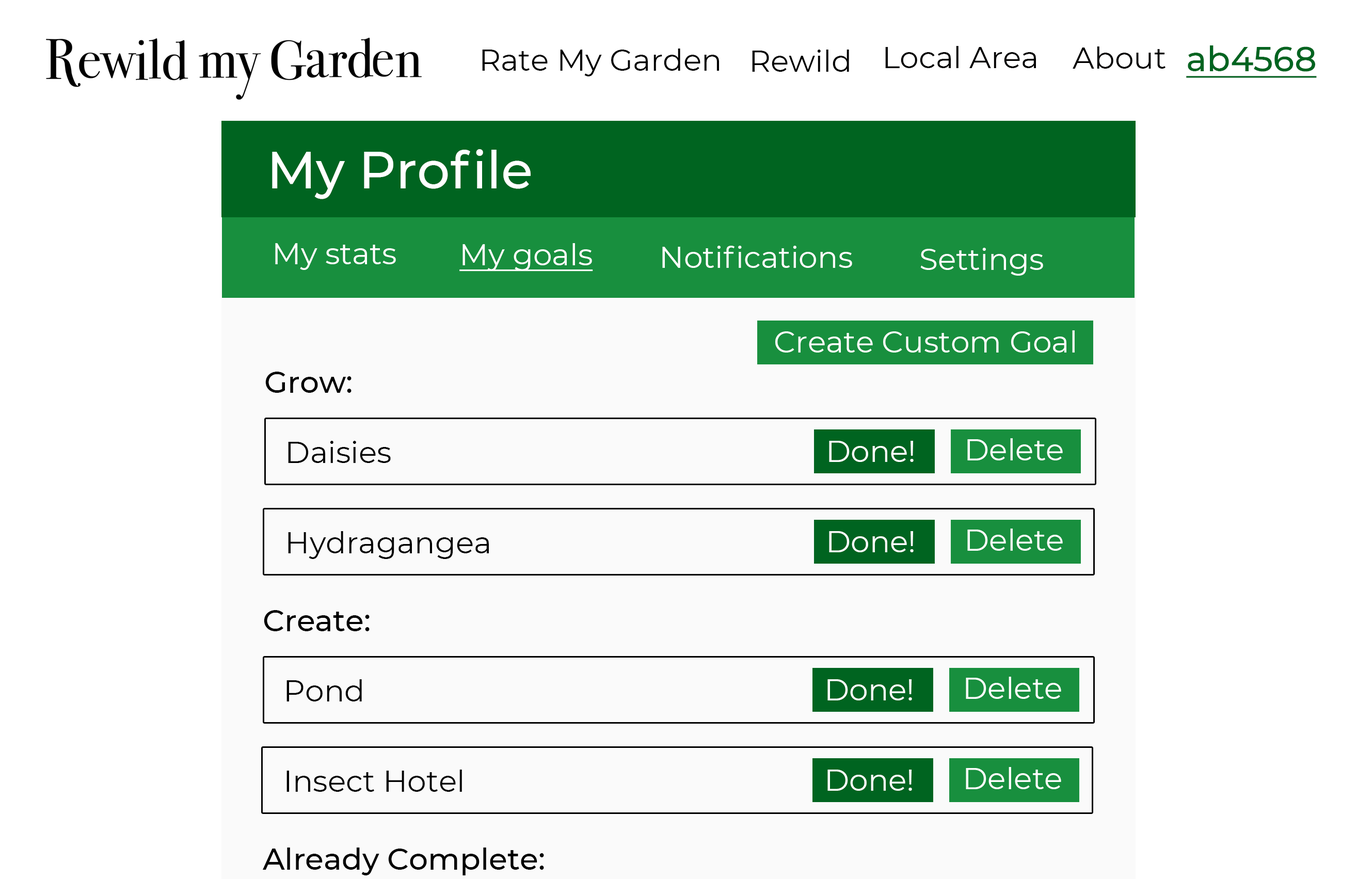
<style>
.page{position:relative;width:1357px;height:879px;background:#ffffff}
.page>*{position:absolute;margin:0}
.t1{font:30.1px "Montserrat-Regular";color:#010101}
.t2{font:30.1px "Montserrat-Regular";color:#000000}
.t3{font:30.1px "Montserrat-Regular";color:#010000}
.t4{font:34.4px "Montserrat-Medium";color:#006420;text-decoration:underline}
.t5{font:51.6px "Montserrat-Medium";color:#ffffff}
.t6{font:30.1px "Montserrat-Regular";color:#ffffff}
.t7{font:30.1px "Montserrat-Regular";color:#ffffff;text-decoration:underline}
.t8{font:30.1px "Montserrat-Medium";color:#000000}
</style>
<div class="page">
<p class="t1" style="left:482px;top:49px;width:237px;height:27px">Rate My Garden</p>
<p class="t2" style="left:752px;top:50px;width:97px;height:22px">Rewild</p>
<p class="t3" style="left:885px;top:46px;width:151px;height:22px">Local Area</p>
<p class="t3" style="left:1072px;top:46px;width:93px;height:23px">About</p>
<p class="t4" style="left:1186px;top:45px;width:131px;height:33px">ab4568</p>
<p class="t5" style="left:272px;top:149px;width:259px;height:50px">My Profile</p>
<p class="t6" style="left:275px;top:243px;width:121px;height:27px">My stats</p>
<p class="t7" style="left:459px;top:243px;width:134px;height:28px">My goals</p>
<p class="t6" style="left:662px;top:246px;width:190px;height:22px">Notifications</p>
<p class="t6" style="left:920px;top:248px;width:123px;height:28px">Settings</p>
<p class="t6" style="left:775px;top:330px;width:299px;height:22px">Create Custom Goal</p>
<p class="t8" style="left:265px;top:372px;width:86px;height:21px">Grow:</p>
<p class="t1" style="left:288px;top:441px;width:103px;height:22px">Daisies</p>
<p class="t6" style="left:829px;top:441px;width:84px;height:21px">Done!</p>
<p class="t6" style="left:967px;top:438px;width:96px;height:22px">Delete</p>
<p class="t1" style="left:288px;top:531px;width:201px;height:28px">Hydragangea</p>
<p class="t6" style="left:829px;top:531px;width:84px;height:21px">Done!</p>
<p class="t6" style="left:967px;top:528px;width:96px;height:23px">Delete</p>
<p class="t8" style="left:264px;top:610px;width:106px;height:21px">Create:</p>
<p class="t6" style="left:966px;top:677px;width:95px;height:22px">Delete</p>
<p class="t1" style="left:286px;top:679px;width:76px;height:22px">Pond</p>
<p class="t6" style="left:827px;top:679px;width:85px;height:21px">Done!</p>
<p class="t1" style="left:286px;top:769px;width:176px;height:23px">Insect Hotel</p>
<p class="t6" style="left:827px;top:769px;width:85px;height:22px">Done!</p>
<p class="t6" style="left:966px;top:767px;width:95px;height:22px">Delete</p>
<p class="t8" style="left:262px;top:847px;width:282px;height:28px">Already Complete:</p>
</div>
